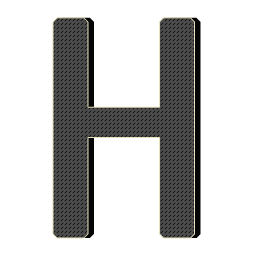
<style>
.page{position:relative;width:256px;height:256px;background:#ffffff}
.page>*{position:absolute;margin:0}
.t1{font:300px "FiraCode-Regular";color:#444444;font-weight:bold}
</style>
<div class="page">
<p class="t1" style="left:53px;top:17px;width:142px;height:221px">H</p>
</div>
